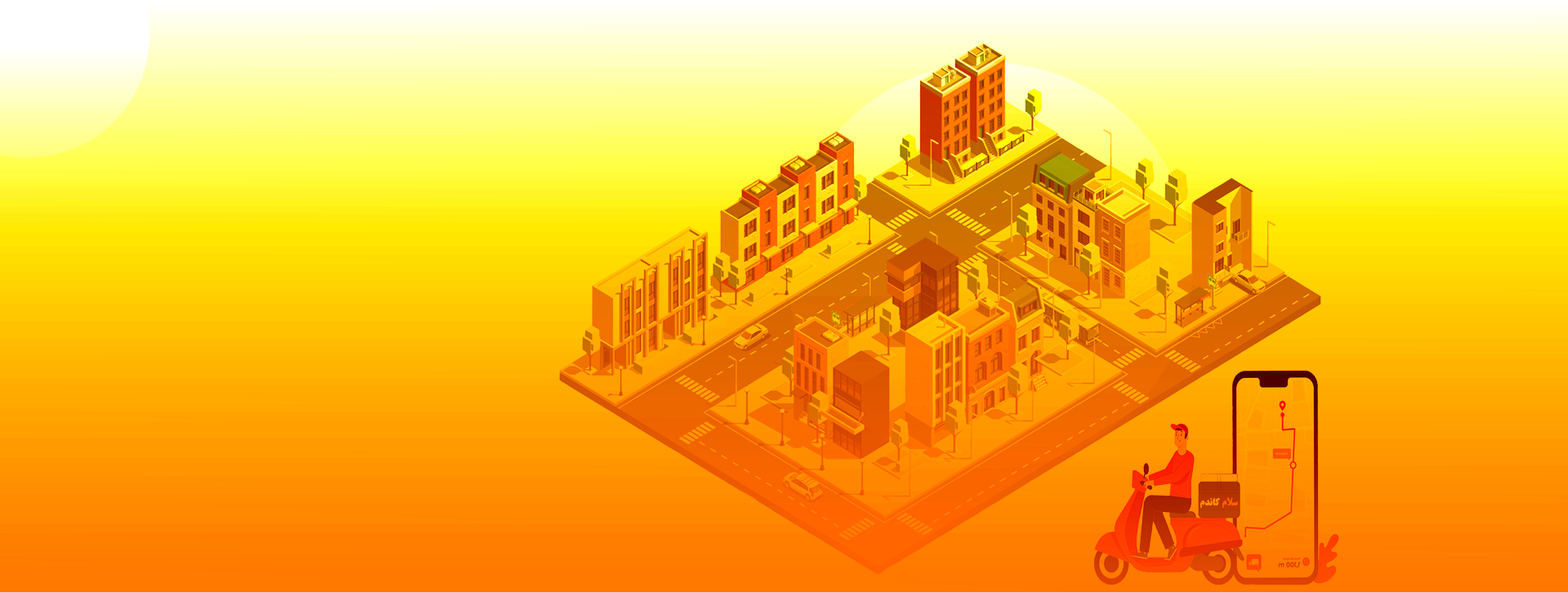
<style>
.page{position:relative;width:1568px;height:592px}
.page>*{position:absolute;margin:0}
.t1{font:10.5px "BTitrBold";letter-spacing:0.02em;scale:0.88 1}
</style>
<div class="page">
<p class="t1" style="left:1200px;top:498px;width:38px;height:10px">سلام کاندم</p>
</div>
